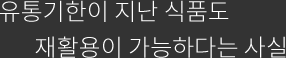
<style>
.page{position:relative;width:286px;height:58px;background:#333333}
.page>*{position:absolute;margin:0}
.t1{font:24px/36px "NotoSansCJKkr-Light";color:#ffffff}
</style>
<div class="page">
<p class="t1" style="left:0px;top:0px;width:286px;height:58px">유통기한이 지난 식품도<br> 재활용이 가능하다는 사실</p>
</div>
